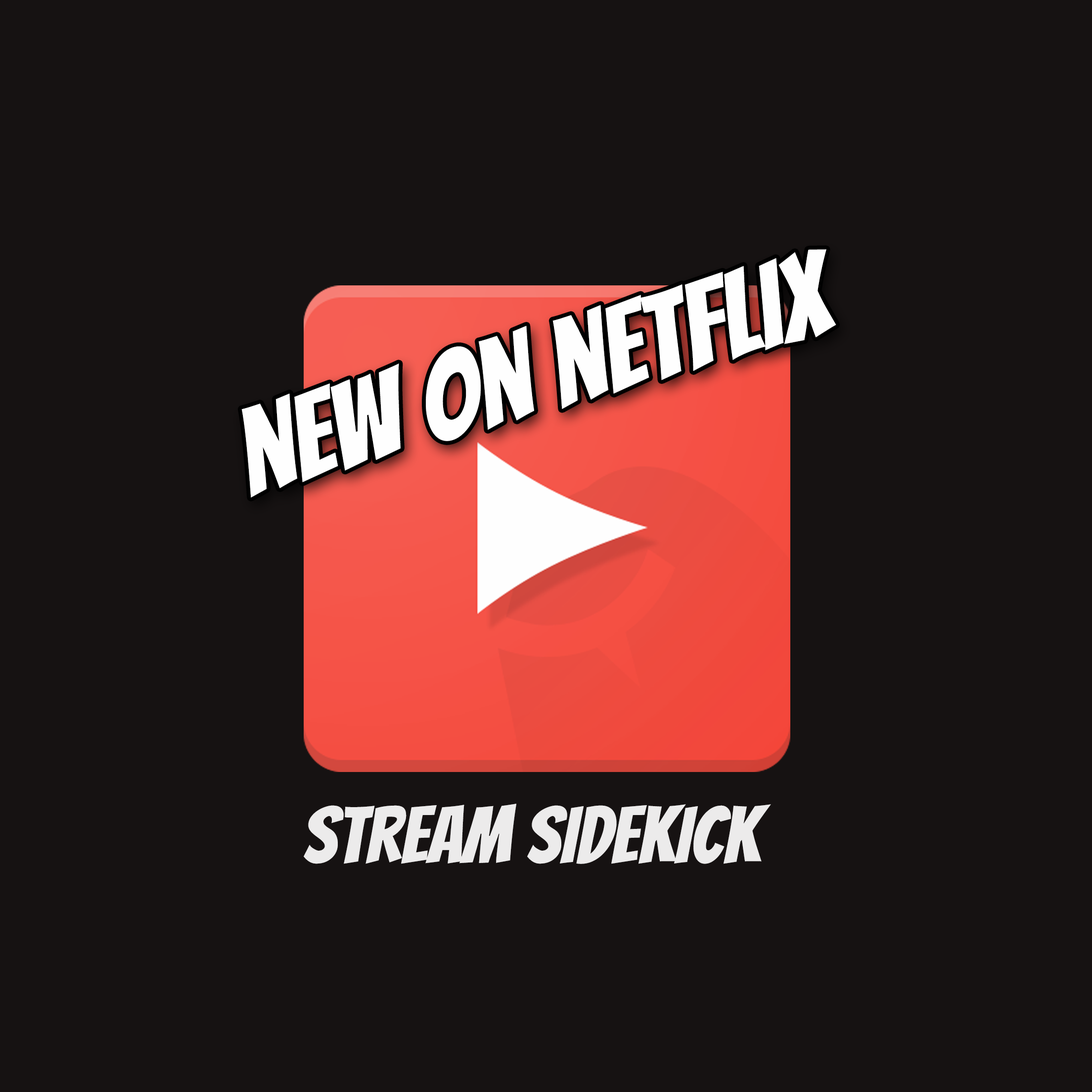
<style>
.page{position:relative;width:1092px;height:1092px;background:#161212}
.page>*{position:absolute;margin:0}
.t1{font:118.3px "Bangers-Regular";color:#fefefe}
.t2{font:79.1px "Bangers-Regular";color:#fefefe}
</style>
<div class="page">
<p class="t1" style="left:241px;top:249px;width:595px;height:249px;rotate:-16deg">new on netflix</p>
<p class="t2" style="left:304px;top:804px;width:467px;height:60px">stream sidekick</p>
</div>
